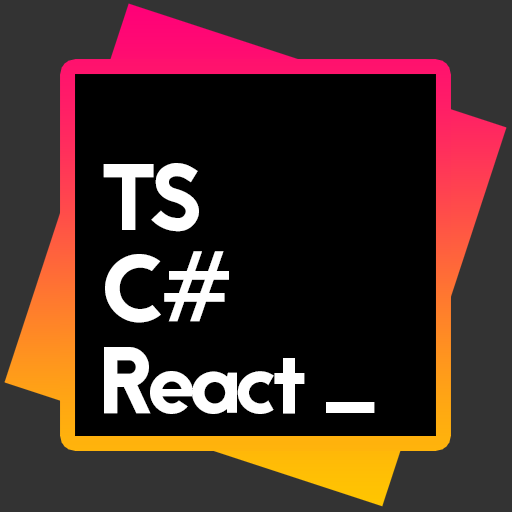
<style>
.page{position:relative;width:512px;height:512px;background:#000000}
.page>*{position:absolute;margin:0}
.t1{font:93.9px/91.7px "Jaapokki-Regular";letter-spacing:-0.075em;color:#ffffff}
</style>
<div class="page">
<p class="t1" style="left:103px;top:163px;width:272px;height:251px">TS<br>C#<br>React _</p>
</div>
